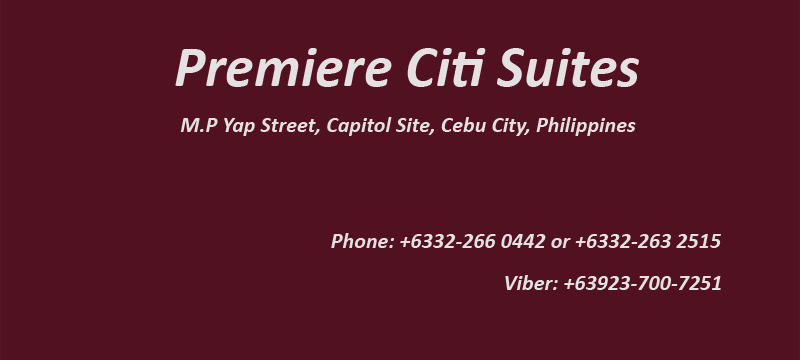
<style>
.page{position:relative;width:800px;height:360px;background:#511121}
.page>*{position:absolute;margin:0}
.t1{font:58.1px "Calibri-BoldItalic";color:#e5e0e1}
.t2{font:22.1px "Calibri-BoldItalic";color:#e5e0e1}
</style>
<div class="page">
<p class="t1" style="left:175px;top:48px;width:464px;height:39px">Premiere Citi Suites</p>
<p class="t2" style="left:180px;top:117px;width:456px;height:19px">M.P Yap Street, Capitol Site, Cebu City, Philippines</p>
<p class="t2" style="left:331px;top:233px;width:390px;height:15px">Phone: +6332-266 0442 or +6332-263 2515</p>
<p class="t2" style="left:505px;top:275px;width:216px;height:15px">Viber: +63923-700-7251</p>
</div>
